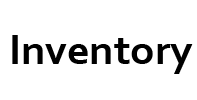
<style>
.page{position:relative;width:197px;height:100px;background:#ffffff}
.page>*{position:absolute;margin:0}
.t1{font:43.9px "Corbel-Bold";color:#000000}
</style>
<div class="page">
<p class="t1" style="left:12px;top:35px;width:181px;height:39px">Inventory</p>
</div>
